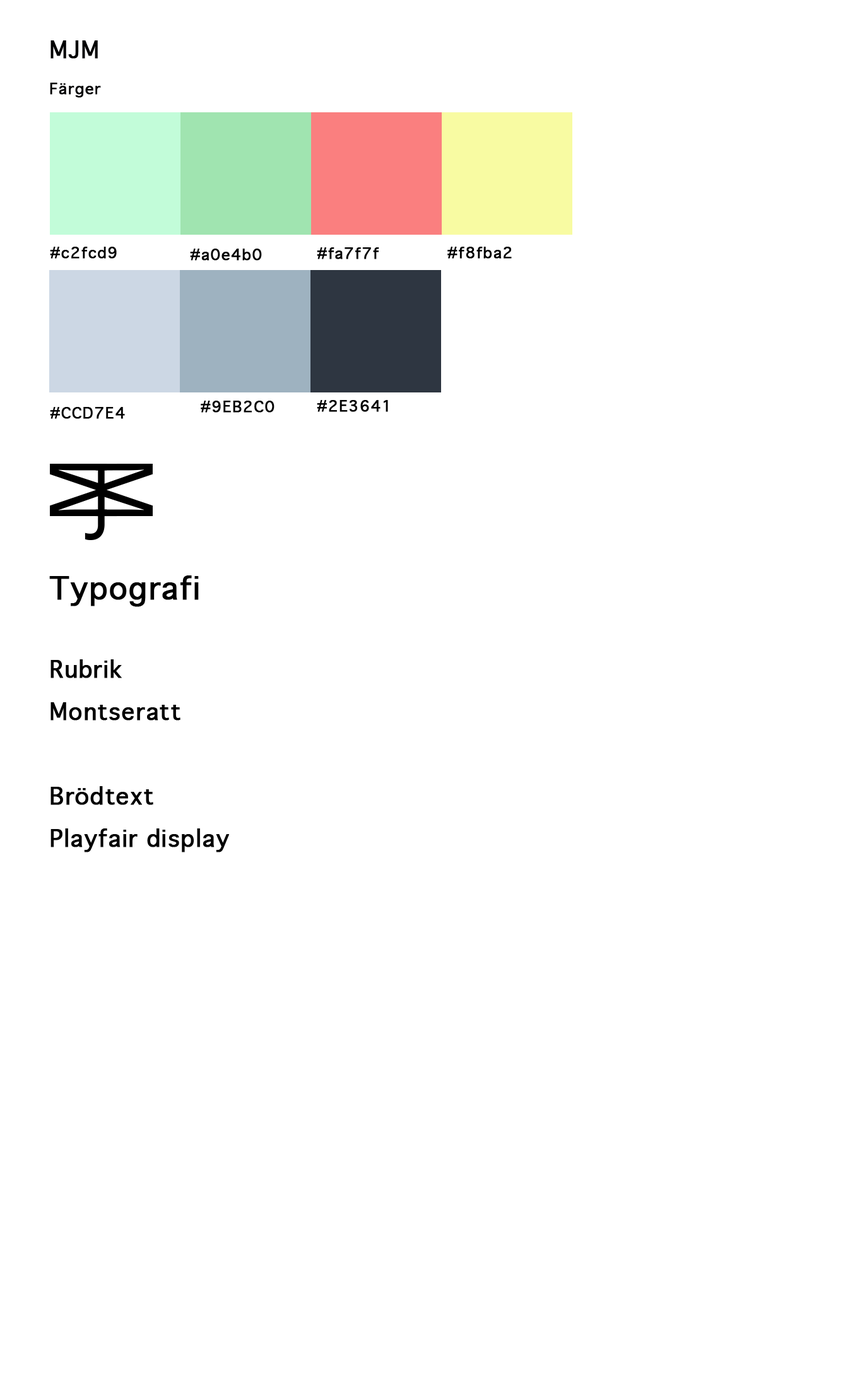
<style>
.page{position:relative;width:862px;height:1383px;background:#ffffff}
.page>*{position:absolute;margin:0}
.t1{font:15.1px/42.3px "Geneva";letter-spacing:0.02em;color:#000001;font-weight:bold}
.t2{font:22.7px/42.3px "Geneva";letter-spacing:0.02em;color:#000001;font-weight:bold}
.t3{font:15.1px "Geneva";letter-spacing:0.02em;color:#000000;font-weight:bold}
.t4{font:22.7px/42.3px "Geneva";letter-spacing:0.02em;color:#000000;font-weight:bold}
.t5{font:30.3px/42.3px "Geneva";letter-spacing:0.02em;color:#000000;font-weight:bold}
</style>
<div class="page">
<p class="t1" style="left:50px;top:40px;width:51px;height:58px"><span class="t2">MJM<br></span>Färger<br><br>Färger</p>
<p class="t3" style="left:50px;top:247px;width:67px;height:12px">#c2fcd9</p>
<p class="t3" style="left:190px;top:249px;width:72px;height:12px">#a0e4b0</p>
<p class="t3" style="left:317px;top:247px;width:62px;height:12px">#fa7f7f</p>
<p class="t3" style="left:447px;top:247px;width:65px;height:12px">#f8fba2</p>
<p class="t3" style="left:201px;top:401px;width:74px;height:12px">#9EB2C0</p>
<p class="t3" style="left:317px;top:400px;width:71px;height:12px">#2E3641</p>
<p class="t3" style="left:50px;top:407px;width:75px;height:12px">#CCD7E4</p>
<p class="t4" style="left:49px;top:576px;width:180px;height:277px"><span class="t5">Typografi<br><br></span>Rubrik   <br>Montseratt<br><br>Brödtext<br>Playfair display</p>
</div>
